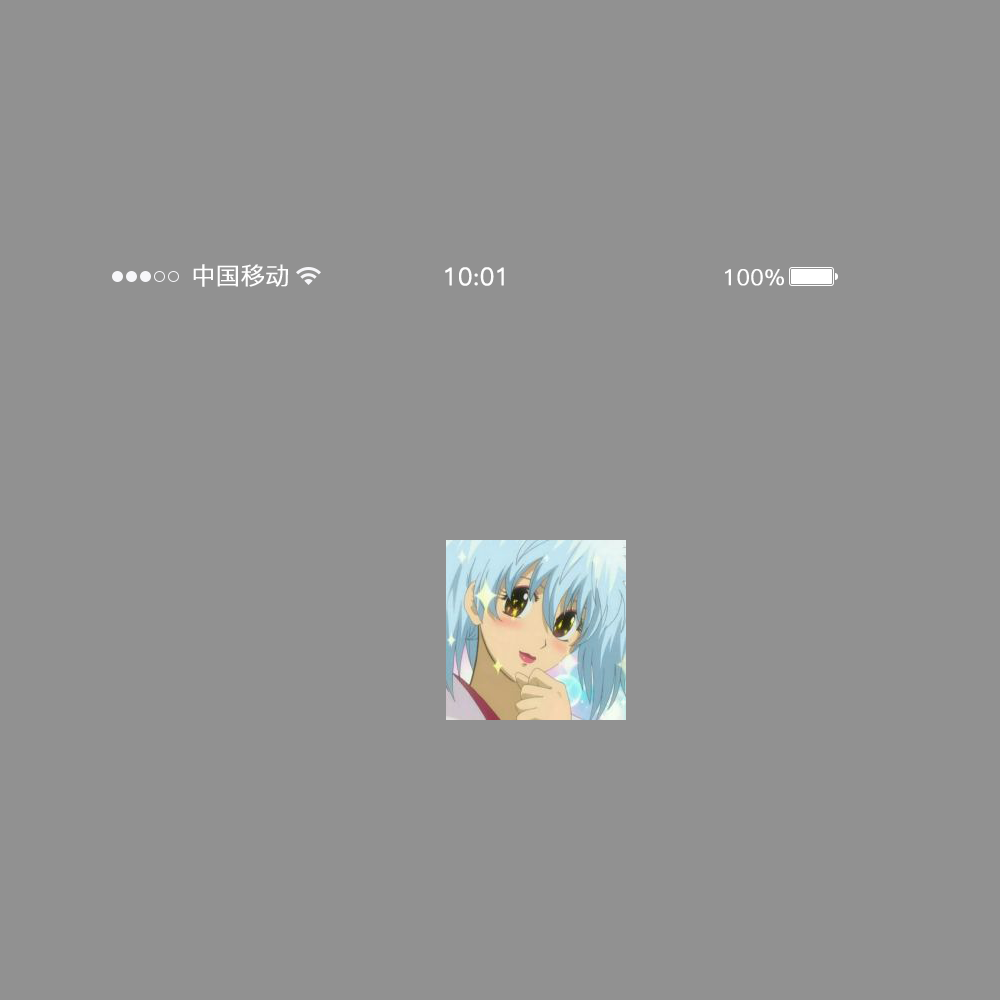
<style>
.page{position:relative;width:1000px;height:1000px;background:#919191}
.page>*{position:absolute;margin:0}
.t1{font:24px "PingFang-SC-Regular";color:#ffffff;font-weight:bold}
.t2{font:24px "PingFang-SC-Regular";color:#fefefe;font-weight:bold}
.t3{font:22px "PingFang-SC-Regular";color:#ffffff;font-weight:bold}
</style>
<div class="page">
<p class="t1" style="left:193px;top:264px;width:95px;height:23px">中国移动</p>
<p class="t2" style="left:445px;top:267px;width:59px;height:19px">10:01</p>
<p class="t3" style="left:725px;top:269px;width:59px;height:17px">100%</p>
</div>
